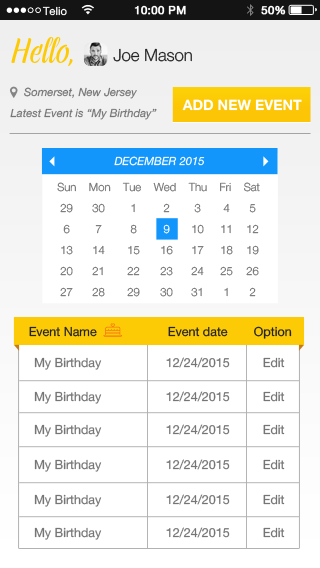
<style>
.page{position:relative;width:320px;height:568px;background:#ffffff}
.page>*{position:absolute;margin:0}
.t1{font:11.2px "HelveticaNeue";color:#ffffff}
.t2{font:11.2px "HelveticaNeue";letter-spacing:0.02em;color:#ffffff;font-weight:bold}
.t3{font:34.2px "AbelinaRedux";color:#fccb06}
.t4{font:16.7px "HelveticaNeue-Light";color:#232323}
.t5{font:11.2px "HelveticaNeue-Italic";color:#757575}
.t6{font:14.3px "HelveticaNeue-Bold";color:#ffffff;text-transform:uppercase}
.t7{font:11.2px "HelveticaNeue-Italic";color:#ffffff}
.t8{font:11.2px "HelveticaNeue-Light";color:#757575}
.t9{font:11.2px "HelveticaNeue-Light";color:#ffffff}
.t10{font:12.5px "HelveticaNeue";color:#242424}
.t11{font:12.5px "HelveticaNeue";color:#757575}
</style>
<div class="page">
<p class="t1" style="left:42px;top:6px;width:25px;height:10px">Telio</p>
<p class="t2" style="left:134px;top:5px;width:52px;height:10px">10:00 PM</p>
<p class="t2" style="left:261px;top:5px;width:25px;height:10px">50%</p>
<p class="t3" style="left:11px;top:37px;width:62px;height:29px">Hello,</p>
<p class="t4" style="left:113px;top:48px;width:79px;height:14px">Joe Mason</p>
<p class="t5" style="left:24px;top:87px;width:113px;height:12px">Somerset, New Jersey</p>
<p class="t6" style="left:182px;top:99px;width:120px;height:12px">Add new event</p>
<p class="t5" style="left:10px;top:108px;width:147px;height:12px">Latest Event is “My Birthday”</p>
<p class="t7" style="left:114px;top:156px;width:91px;height:10px">DECEMBER 2015</p>
<p class="t8" style="left:57px;top:182px;width:203px;height:10px">Sun    Mon    Tue    Wed    Thu    Fri    Sat</p>
<p class="t8" style="left:60px;top:203px;width:13px;height:10px">29</p>
<p class="t8" style="left:92px;top:203px;width:13px;height:10px">30</p>
<p class="t8" style="left:131px;top:203px;width:4px;height:10px">1</p>
<p class="t8" style="left:163px;top:203px;width:7px;height:10px">2</p>
<p class="t8" style="left:194px;top:203px;width:7px;height:10px">3</p>
<p class="t8" style="left:223px;top:203px;width:7px;height:10px">4</p>
<p class="t8" style="left:249px;top:204px;width:7px;height:9px">5</p>
<p class="t8" style="left:63px;top:224px;width:7px;height:10px">6</p>
<p class="t8" style="left:95px;top:225px;width:7px;height:9px">7</p>
<p class="t8" style="left:130px;top:224px;width:7px;height:10px">8</p>
<p class="t9" style="left:163px;top:224px;width:7px;height:10px">9</p>
<p class="t8" style="left:192px;top:224px;width:12px;height:10px">10</p>
<p class="t8" style="left:221px;top:224px;width:10px;height:10px">11</p>
<p class="t8" style="left:247px;top:224px;width:12px;height:10px">12</p>
<p class="t8" style="left:61px;top:245px;width:12px;height:10px">13</p>
<p class="t8" style="left:93px;top:245px;width:12px;height:10px">14</p>
<p class="t8" style="left:128px;top:245px;width:12px;height:10px">15</p>
<p class="t8" style="left:161px;top:245px;width:12px;height:10px">16</p>
<p class="t8" style="left:192px;top:245px;width:12px;height:10px">17</p>
<p class="t8" style="left:221px;top:245px;width:12px;height:10px">18</p>
<p class="t8" style="left:247px;top:245px;width:12px;height:10px">19</p>
<p class="t8" style="left:60px;top:266px;width:13px;height:10px">20</p>
<p class="t8" style="left:92px;top:266px;width:11px;height:10px">21</p>
<p class="t8" style="left:127px;top:266px;width:13px;height:10px">22</p>
<p class="t8" style="left:160px;top:266px;width:13px;height:10px">23</p>
<p class="t8" style="left:191px;top:266px;width:13px;height:10px">24</p>
<p class="t8" style="left:220px;top:266px;width:13px;height:10px">25</p>
<p class="t8" style="left:246px;top:266px;width:13px;height:10px">26</p>
<p class="t8" style="left:60px;top:287px;width:13px;height:10px">27</p>
<p class="t8" style="left:92px;top:287px;width:13px;height:10px">28</p>
<p class="t8" style="left:127px;top:287px;width:13px;height:10px">29</p>
<p class="t8" style="left:160px;top:287px;width:13px;height:10px">30</p>
<p class="t8" style="left:191px;top:287px;width:11px;height:10px">31</p>
<p class="t8" style="left:224px;top:287px;width:4px;height:10px">1</p>
<p class="t8" style="left:249px;top:287px;width:7px;height:10px">2</p>
<p class="t10" style="left:29px;top:326px;width:68px;height:11px">Event Name</p>
<p class="t10" style="left:168px;top:326px;width:60px;height:11px">Event date</p>
<p class="t10" style="left:254px;top:326px;width:38px;height:13px">Option</p>
<p class="t11" style="left:34px;top:357px;width:68px;height:13px">My Birthday</p>
<p class="t11" style="left:166px;top:357px;width:64px;height:11px">12/24/2015</p>
<p class="t11" style="left:263px;top:357px;width:22px;height:11px">Edit</p>
<p class="t11" style="left:34px;top:391px;width:68px;height:13px">My Birthday</p>
<p class="t11" style="left:166px;top:391px;width:64px;height:11px">12/24/2015</p>
<p class="t11" style="left:263px;top:391px;width:22px;height:11px">Edit</p>
<p class="t11" style="left:34px;top:424px;width:68px;height:13px">My Birthday</p>
<p class="t11" style="left:166px;top:424px;width:64px;height:11px">12/24/2015</p>
<p class="t11" style="left:263px;top:424px;width:22px;height:11px">Edit</p>
<p class="t11" style="left:34px;top:459px;width:68px;height:13px">My Birthday</p>
<p class="t11" style="left:166px;top:459px;width:64px;height:11px">12/24/2015</p>
<p class="t11" style="left:263px;top:459px;width:22px;height:11px">Edit</p>
<p class="t11" style="left:34px;top:494px;width:68px;height:13px">My Birthday</p>
<p class="t11" style="left:166px;top:494px;width:64px;height:11px">12/24/2015</p>
<p class="t11" style="left:263px;top:494px;width:22px;height:11px">Edit</p>
<p class="t11" style="left:34px;top:527px;width:68px;height:13px">My Birthday</p>
<p class="t11" style="left:166px;top:527px;width:64px;height:11px">12/24/2015</p>
<p class="t11" style="left:263px;top:527px;width:22px;height:11px">Edit</p>
</div>
